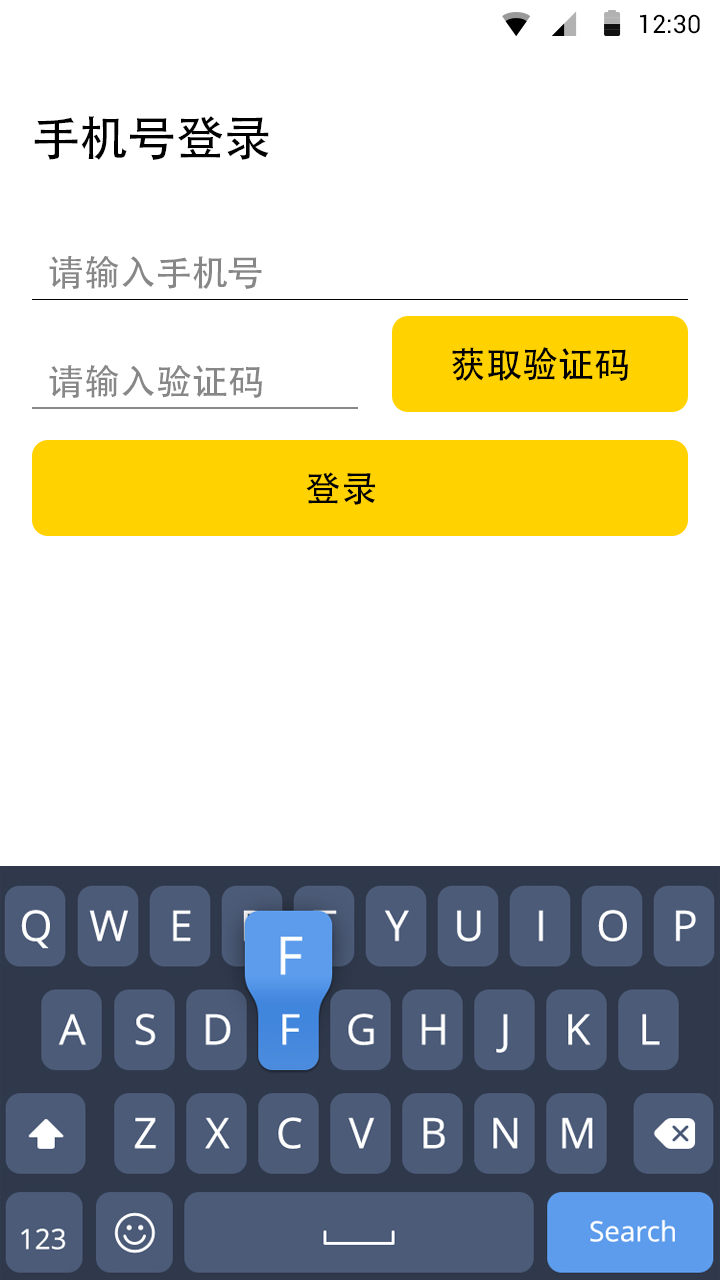
<style>
.page{position:relative;width:720px;height:1280px;background:#ffffff}
.page>*{position:absolute;margin:0}
.t1{font:25.4px "Roboto-Regular";color:#000000}
.t2{font:48px "AdobeHeitiStd-Regular";letter-spacing:-0.004em;color:#000000}
.t3{font:36px "AdobeHeitiStd-Regular";letter-spacing:-0.004em;color:#878787}
.t4{font:36px "AdobeHeitiStd-Regular";color:#000000}
.t5{font:35.7px "AdobeHeitiStd-Regular";letter-spacing:-0.004em;color:#878787}
.t6{font:36px "AdobeHeitiStd-Regular";letter-spacing:-0.004em;color:#000000}
</style>
<div class="page">
<p class="t1" style="left:640px;top:14px;width:60px;height:20px">12:30</p>
<p class="t2" style="left:34px;top:116px;width:235px;height:44px">手机号登录</p>
<p class="t3" style="left:49px;top:255px;width:213px;height:34px">请输入手机号</p>
<p class="t4" style="left:452px;top:347px;width:176px;height:34px">获取验证码</p>
<p class="t5" style="left:49px;top:364px;width:213px;height:34px">请输入验证码</p>
<p class="t6" style="left:306px;top:472px;width:69px;height:33px">登录</p>
</div>
